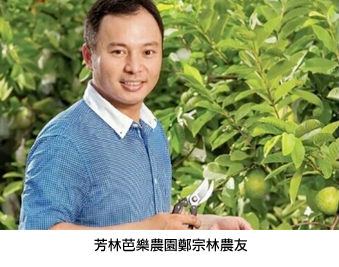
<style>
.page{position:relative;width:339px;height:267px}
.page>*{position:absolute;margin:0}
.t1{font:14px "LiHeiPro";color:#000000}
</style>
<div class="page">
<p class="t1" style="left:94px;top:238px;width:154px;height:14px">芳林芭樂農園鄭宗林農友</p>
</div>
